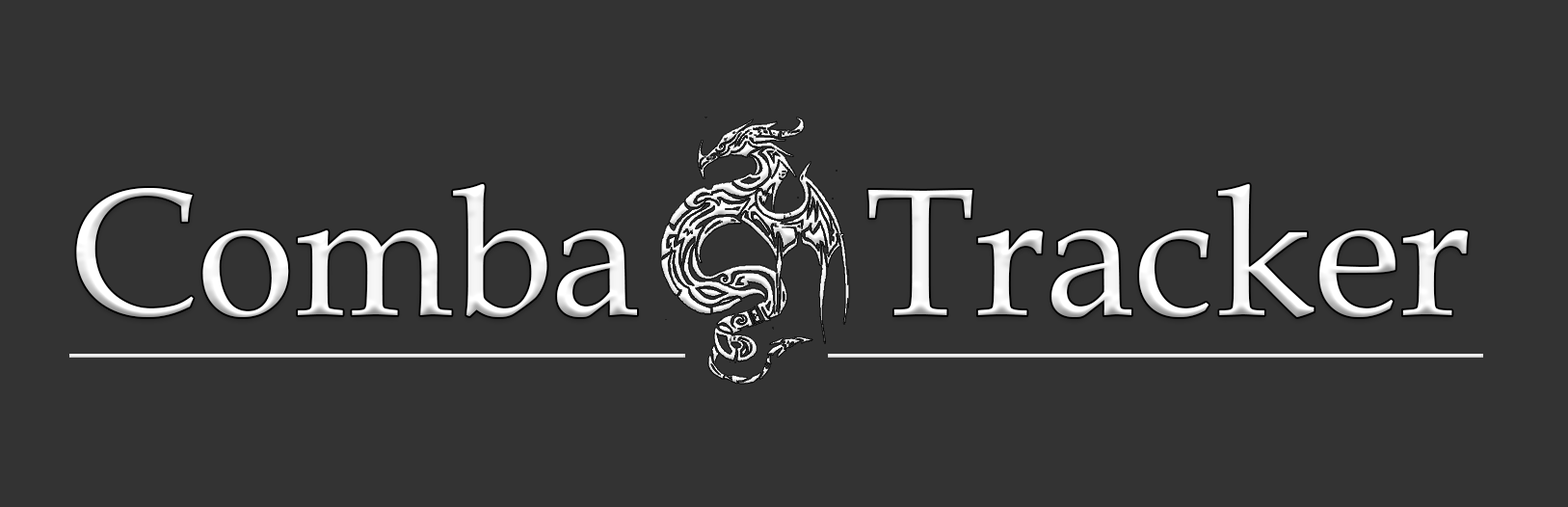
<style>
.page{position:relative;width:1568px;height:507px;background:#333333}
.page>*{position:absolute;margin:0}
.t1{font:179.3px "BookAntiqua";color:#ffffff}
</style>
<div class="page">
<p class="t1" style="left:76px;top:184px;width:1392px;height:133px">Comba     Tracker</p>
</div>
